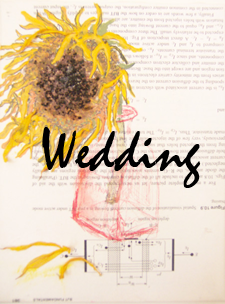
<style>
.page{position:relative;width:225px;height:304px}
.page>*{position:absolute;margin:0}
.t1{font:60px "Mistral";color:#000000}
</style>
<div class="page">
<p class="t1" style="left:42px;top:127px;width:159px;height:61px">Wedding</p>
</div>
